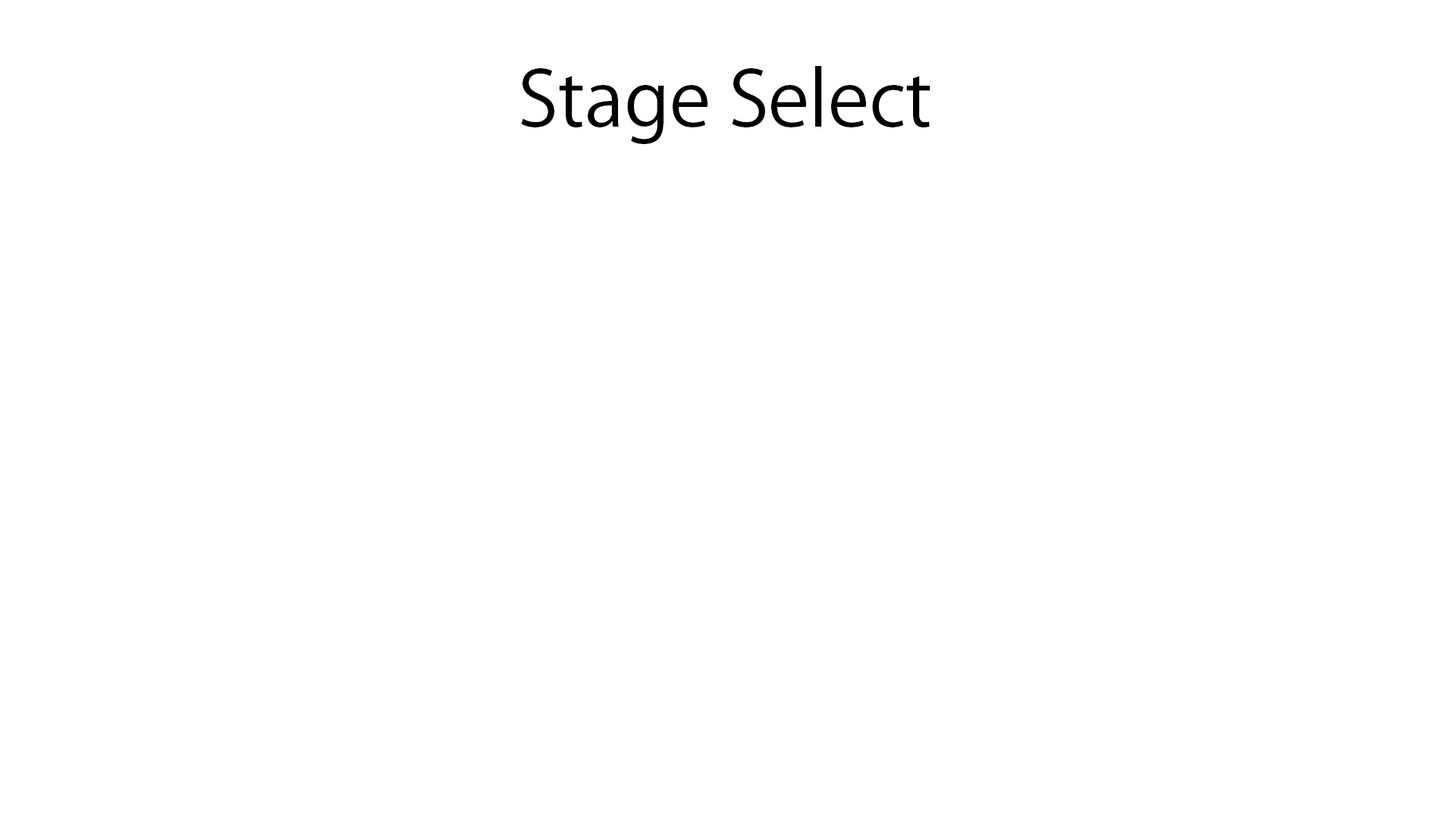
<style>
.page{position:relative;width:1456px;height:819px;background:#ffffff}
.page>*{position:absolute;margin:0}
.t1{font:75.8px "KozGoPr6N-Regular";color:#000000}
</style>
<div class="page">
<p class="t1" style="left:521px;top:66px;width:409px;height:78px">Stage Select</p>
</div>
